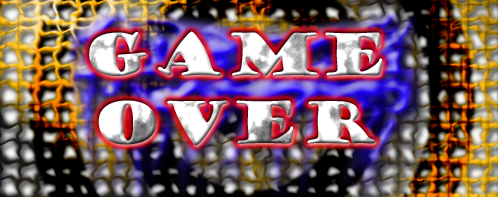
<style>
.page{position:relative;width:498px;height:197px}
.page>*{position:absolute;margin:0}
.t1{font:57px "GoudyStout"}
</style>
<div class="page">
<p class="t1" style="left:89px;top:31px;width:294px;height:115px;text-align:center">Game<br>Over</p>
</div>
